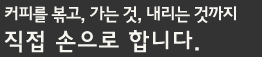
<style>
.page{position:relative;width:262px;height:57px;background:#333333}
.page>*{position:absolute;margin:0}
.t1{font:18px "HaanYGodic23";letter-spacing:-0.1em;color:#f6f5f0}
.t2{font:24px "HaanYGodic23";color:#f6f5f0}
</style>
<div class="page">
<p class="t1" style="left:4px;top:6px;width:232px;height:47px">커피를 볶고, 가는 것, 내리는 것까지 <br><span class="t2">직접 손으로 합니다.</span></p>
</div>
